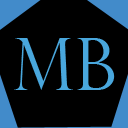
<style>
.page{position:relative;width:128px;height:128px;background:#000000}
.page>*{position:absolute;margin:0}
.t1{font:72px "PerpetuaTitlingMT-Light";color:#49a7dd}
</style>
<div class="page">
<p class="t1" style="left:14px;top:38px;width:101px;height:52px">MB</p>
</div>
